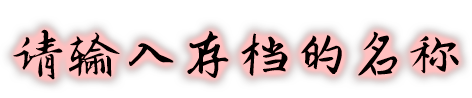
<style>
.page{position:relative;width:472px;height:98px;background:#ffffff}
.page>*{position:absolute;margin:0}
.t1{font:52.8px "SentyZHAO";color:#020000}
</style>
<div class="page">
<p class="t1" style="left:13px;top:29px;width:446px;height:51px">请输入存档的名称</p>
</div>
